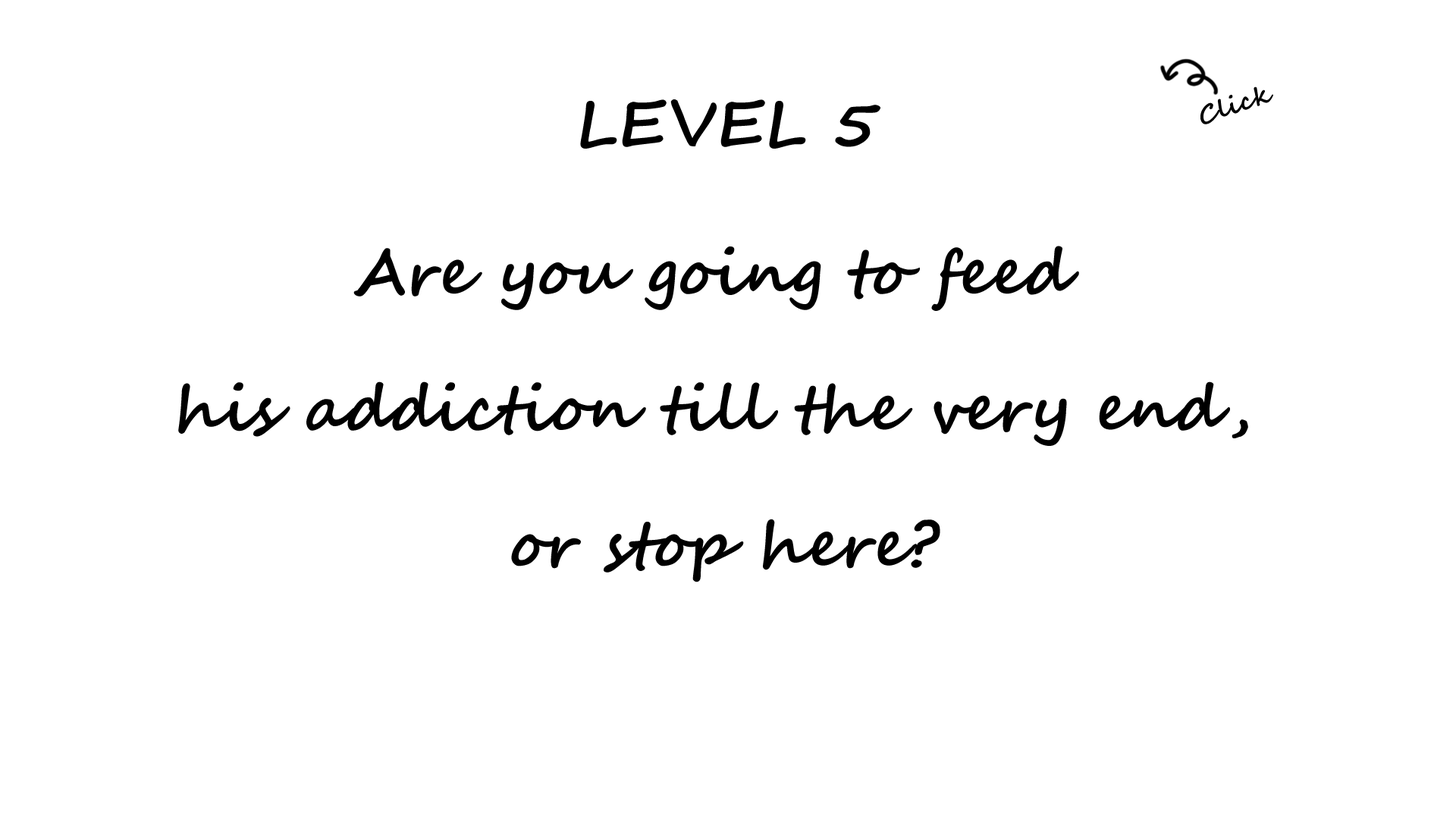
<style>
.page{position:relative;width:1456px;height:819px;background:#ffffff}
.page>*{position:absolute;margin:0}
.t1{font:24.9px "SegoeScript-Bold";color:#000000;scale:1.06 1}
.t2{font:63.2px "SegoeScript-Bold";color:#000000}
.t3{font:63.2px/135.9px "SegoeScript-Bold";color:#000000}
</style>
<div class="page">
<p class="t1" style="left:1200px;top:86px;width:73px;height:38px;rotate:-19deg">Click</p>
<p class="t2" style="left:580px;top:99px;width:300px;height:50px">LEVEL 5</p>
<p class="t3" style="left:178px;top:246px;width:1070px;height:336px;text-align:center">Are you going to feed <br>his addiction till the very end, <br>or stop here?</p>
</div>
